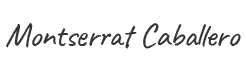
<style>
.page{position:relative;width:246px;height:71px;background:#ffffff}
.page>*{position:absolute;margin:0}
.t1{font:34px "Caveat-Regular";letter-spacing:-0.025em;color:#343434}
</style>
<div class="page">
<p class="t1" style="left:6px;top:23px;width:235px;height:26px">Montserrat Caballero</p>
</div>
